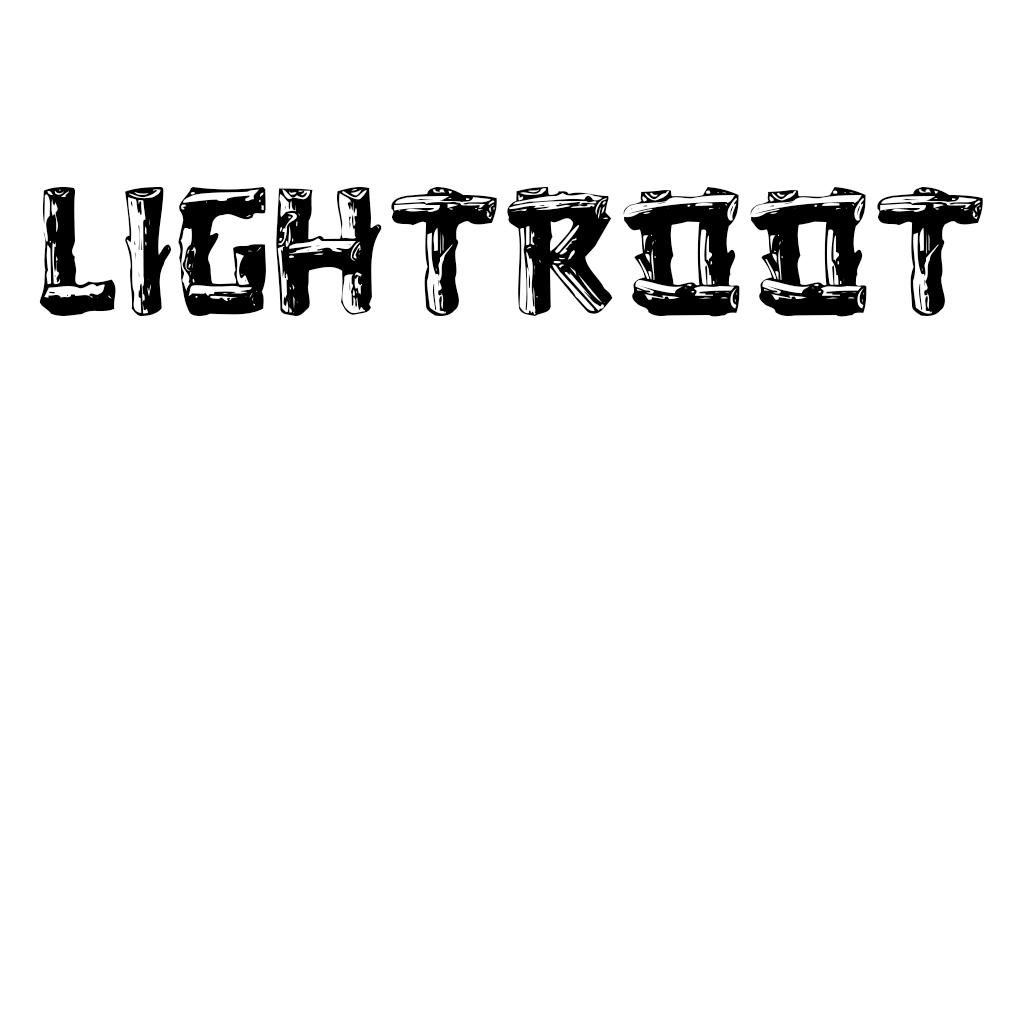
<style>
.page{position:relative;width:1024px;height:1024px;background:#ffffff}
.page>*{position:absolute;margin:0}
.t1{font:160.9px "Logger";color:#000000}
</style>
<div class="page">
<p class="t1" style="left:39px;top:187px;width:944px;height:130px">LightRoot</p>
</div>
